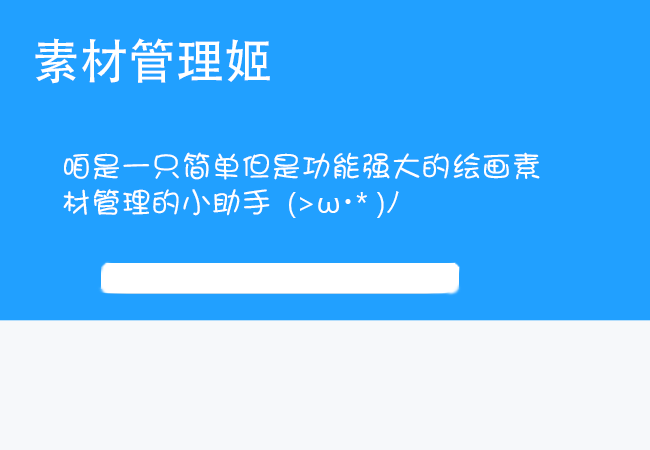
<style>
.page{position:relative;width:650px;height:450px;background:#21a0ff}
.page>*{position:absolute;margin:0}
.t1{font:48px "AdobeHeitiStd-Regular";color:#ffffff}
.t2{font:30px/35px "DFShaoNvW5";color:#ffffff}
.t3{font:30px/35px "YuGothicUI-Regular";color:#ffffff}
</style>
<div class="page">
<p class="t1" style="left:35px;top:38px;width:235px;height:46px">素材管理姬</p>
<p class="t2" style="left:63px;top:152px;width:477px;height:66px">咱是一只简单但是功能强大的绘画素材管理的小助手 <span class="t3">(&gt;ω･* )ﾉ</span></p>
</div>
